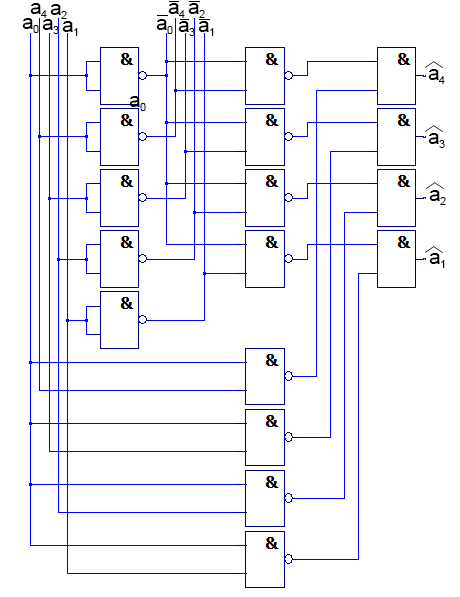
<style>
.page{position:relative;width:460px;height:597px;background:#ffffff}
.page>*{position:absolute;margin:0}
.t1{font:21.3px "ArialMT";color:#000000}
.t2{font:10.7px "ArialMT";color:#000000}
</style>
<div class="page">
<p class="t1" style="left:30px;top:3px;width:11px;height:11px">a</p>
<p class="t1" style="left:50px;top:4px;width:11px;height:11px">a</p>
<p class="t1" style="left:168px;top:3px;width:11px;height:11px">a</p>
<p class="t1" style="left:188px;top:3px;width:11px;height:11px">a</p>
<p class="t2" style="left:41px;top:10px;width:6px;height:8px">4</p>
<p class="t2" style="left:61px;top:11px;width:6px;height:8px">2</p>
<p class="t2" style="left:179px;top:10px;width:6px;height:8px">4</p>
<p class="t2" style="left:199px;top:10px;width:6px;height:8px">2</p>
<p class="t1" style="left:22px;top:18px;width:11px;height:11px">a</p>
<p class="t2" style="left:33px;top:25px;width:6px;height:8px">0</p>
<p class="t1" style="left:42px;top:19px;width:11px;height:11px">a</p>
<p class="t2" style="left:53px;top:26px;width:6px;height:8px">3</p>
<p class="t1" style="left:62px;top:21px;width:11px;height:11px">a</p>
<p class="t2" style="left:74px;top:28px;width:4px;height:8px">1</p>
<p class="t1" style="left:156px;top:19px;width:11px;height:11px">a</p>
<p class="t2" style="left:167px;top:26px;width:6px;height:8px">0</p>
<p class="t1" style="left:178px;top:21px;width:11px;height:11px">a</p>
<p class="t2" style="left:189px;top:28px;width:6px;height:8px">3</p>
<p class="t1" style="left:198px;top:21px;width:11px;height:11px">a</p>
<p class="t2" style="left:210px;top:28px;width:4px;height:8px">1</p>
<p class="t1" style="left:428px;top:69px;width:11px;height:11px">a</p>
<p class="t2" style="left:439px;top:76px;width:6px;height:8px">4</p>
<p class="t1" style="left:129px;top:96px;width:11px;height:11px">a</p>
<p class="t2" style="left:140px;top:103px;width:6px;height:8px">0</p>
<p class="t1" style="left:428px;top:133px;width:11px;height:11px">a</p>
<p class="t2" style="left:439px;top:140px;width:6px;height:8px">3</p>
<p class="t1" style="left:429px;top:190px;width:11px;height:11px">a</p>
<p class="t2" style="left:440px;top:197px;width:6px;height:8px">2</p>
<p class="t1" style="left:429px;top:253px;width:11px;height:11px">a</p>
<p class="t2" style="left:441px;top:260px;width:4px;height:8px">1</p>
</div>
